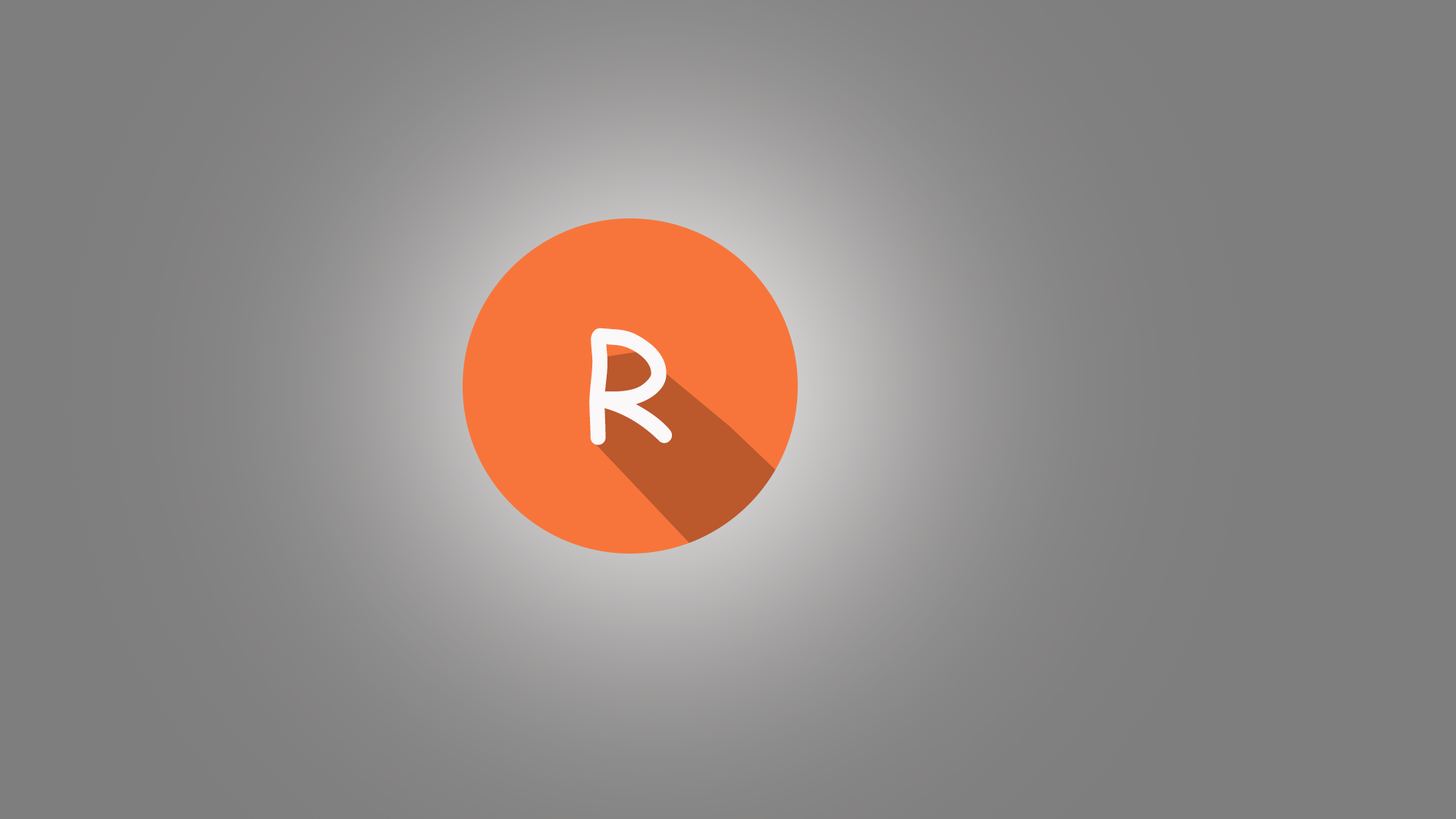
<style>
.page{position:relative;width:1456px;height:819px;background:#7f7e7e}
.page>*{position:absolute;margin:0}
.t1{font:151.7px "ComicSansMS";color:#faf8f8}
</style>
<div class="page">
<p class="t1" style="left:589px;top:328px;width:83px;height:117px">R</p>
</div>
